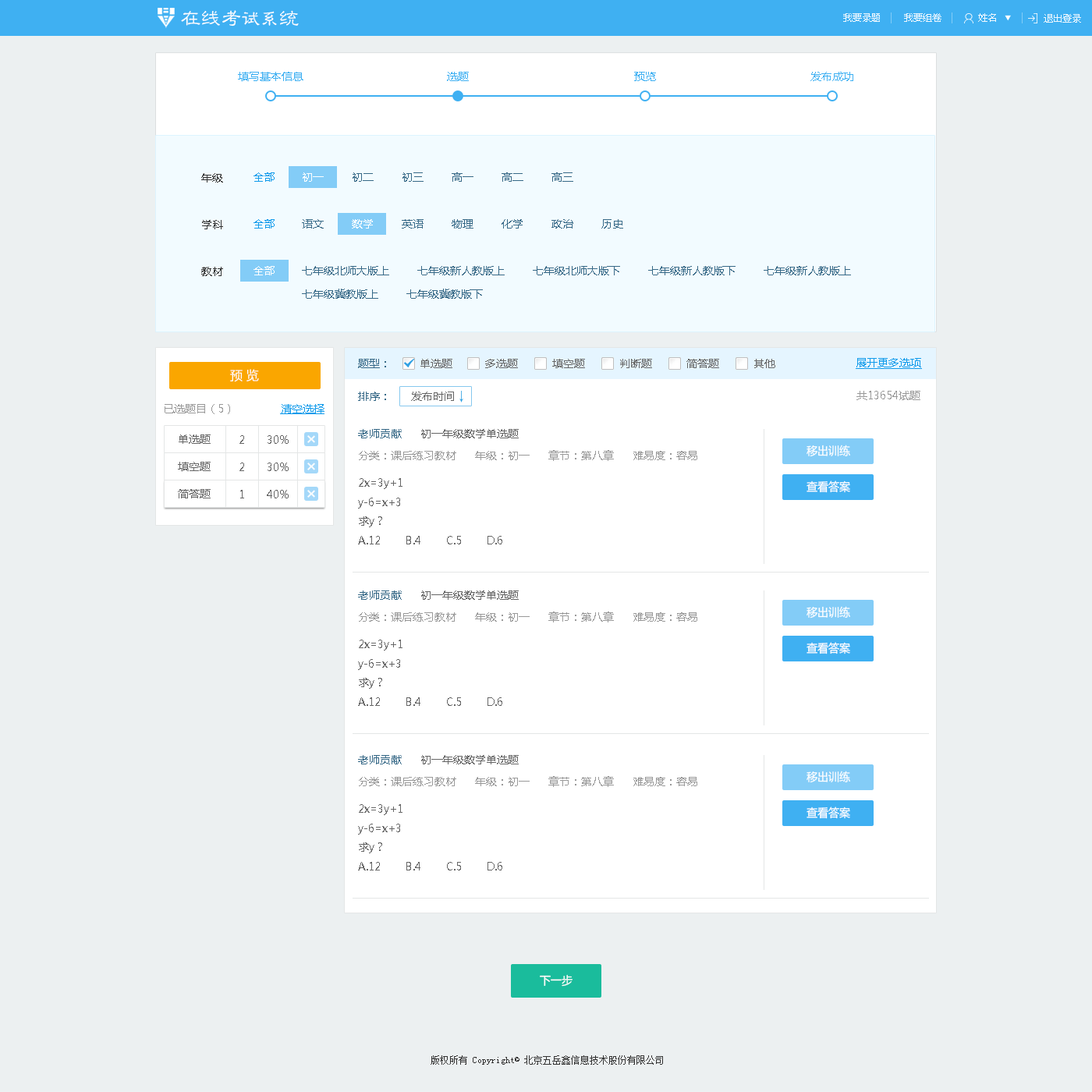
<style>
.page{position:relative;width:1092px;height:1092px;background:#ecf0f1}
.page>*{position:absolute;margin:0}
.t1{font:20.3px "GBJenLei-Medium";color:#ffffff}
.t2{font:18.7px "GBJenLei-Medium";color:#ffffff}
.t3{font:9.4px "MicrosoftYaHei";color:#ffffff}
.t4{font:10.9px "MicrosoftYaHei";color:#3fb0f2}
.t5{font:10.9px "MicrosoftYaHei";color:#333333}
.t6{font:10.9px "MicrosoftYaHei";color:#119beb}
.t7{font:10.9px "MicrosoftYaHei";color:#376987}
.t8{font:10.9px "MicrosoftYaHei";color:#ffffff}
.t9{font:10.9px/23.4px "MicrosoftYaHei";color:#376987}
.t10{font:10.9px "MicrosoftYaHei";color:#666666}
.t11{font:10.9px "MicrosoftYaHei";color:#119beb;text-decoration:underline}
.t12{font:12.5px "MicrosoftYaHei";color:#ffffff}
.t13{font:10.9px "MicrosoftYaHei";color:#999999}
.t14{font:11.2px "MicrosoftYaHei";color:#ffffff}
.t15{font:9.4px "NSimSun";color:#333333}
</style>
<div class="page">
<p class="t1" style="left:181px;top:10px;width:118px;height:17px">在线考<span class="t2">试系</span>统</p>
<p class="t3" style="left:843px;top:13px;width:37px;height:9px;opacity:0.9">我要录题</p>
<p class="t3" style="left:904px;top:13px;width:37px;height:9px;opacity:0.9">我要组卷</p>
<p class="t3" style="left:978px;top:13px;width:18px;height:9px;opacity:0.9">姓名</p>
<p class="t3" style="left:1044px;top:14px;width:37px;height:9px;opacity:0.9">退出登录</p>
<p class="t4" style="left:238px;top:72px;width:65px;height:9px">填写基本信息</p>
<p class="t4" style="left:447px;top:72px;width:22px;height:9px">选题</p>
<p class="t4" style="left:634px;top:72px;width:22px;height:9px">预览</p>
<p class="t4" style="left:810px;top:72px;width:43px;height:9px">发布成功</p>
<p class="t5" style="left:201px;top:173px;width:22px;height:10px">年级</p>
<p class="t6" style="left:253px;top:172px;width:22px;height:10px">全部</p>
<p class="t7" style="left:303px;top:172px;width:270px;height:10px"><span class="t8">初一</span>         初二         初三         高一         高二         高三</p>
<p class="t5" style="left:202px;top:220px;width:21px;height:9px">学科</p>
<p class="t6" style="left:253px;top:219px;width:22px;height:10px">全部</p>
<p class="t7" style="left:302px;top:219px;width:321px;height:10px">语文         <span class="t8">数学</span>         英语         物理         化学         政治         历史</p>
<p class="t5" style="left:201px;top:267px;width:22px;height:9px">教材</p>
<p class="t8" style="left:253px;top:266px;width:22px;height:9px">全部</p>
<p class="t9" style="left:302px;top:266px;width:549px;height:33px">七年级北师大版上         七年级新人教版上         七年级北师大版下         七年级新人教版下         七年级新人教版上         <br>七年级冀教版上         七年级冀教版下</p>
<p class="t7" style="left:358px;top:359px;width:28px;height:9px">题型：</p>
<p class="t10" style="left:420px;top:359px;width:32px;height:9px">单选题</p>
<p class="t10" style="left:485px;top:359px;width:33px;height:9px">多选题</p>
<p class="t10" style="left:552px;top:359px;width:33px;height:9px">填空题</p>
<p class="t10" style="left:620px;top:359px;width:32px;height:9px">判断题</p>
<p class="t10" style="left:686px;top:359px;width:33px;height:9px">简答题</p>
<p class="t10" style="left:754px;top:359px;width:21px;height:9px">其他</p>
<p class="t11" style="left:856px;top:358px;width:66px;height:11px">展开更多选项</p>
<p class="t12" style="left:230px;top:369px;width:29px;height:13px">预 览</p>
<p class="t7" style="left:358px;top:392px;width:28px;height:9px">排序：</p>
<p class="t10" style="left:411px;top:392px;width:43px;height:9px">发布时间</p>
<p class="t13" style="left:856px;top:391px;width:64px;height:9px">共13654试题</p>
<p class="t13" style="left:165px;top:404px;width:65px;height:10px">已选题目（5）</p>
<p class="t11" style="left:280px;top:404px;width:44px;height:10px">清空选择</p>
<p class="t10" style="left:179px;top:434px;width:32px;height:10px">单选题</p>
<p class="t10" style="left:239px;top:435px;width:5px;height:9px">2</p>
<p class="t10" style="left:268px;top:435px;width:21px;height:9px">30%</p>
<p class="t10" style="left:358px;top:429px;width:161px;height:9px"><span class="t7">老师贡献      </span>初一年级数学单选题</p>
<p class="t14" style="left:807px;top:445px;width:43px;height:12px">移出训练</p>
<p class="t10" style="left:178px;top:462px;width:33px;height:9px">填空题</p>
<p class="t13" style="left:359px;top:450px;width:338px;height:11px">分类：课后练习教材      年级：初一      章节：第八章      难易度：容易</p>
<p class="t10" style="left:239px;top:463px;width:5px;height:8px">2</p>
<p class="t10" style="left:268px;top:463px;width:21px;height:8px">30%</p>
<p class="t10" style="left:358px;top:478px;width:144px;height:66px">2x=3y+1<br>y-6=x+3<br>求y？<br>A.12        B.4        C.5        D.6</p>
<p class="t14" style="left:807px;top:480px;width:43px;height:13px">查看答案</p>
<p class="t10" style="left:178px;top:489px;width:33px;height:9px">简答题</p>
<p class="t10" style="left:240px;top:490px;width:4px;height:8px">1</p>
<p class="t10" style="left:267px;top:490px;width:22px;height:8px">40%</p>
<p class="t10" style="left:358px;top:590px;width:161px;height:10px"><span class="t7">老师贡献      </span>初一年级数学单选题</p>
<p class="t13" style="left:359px;top:612px;width:338px;height:10px">分类：课后练习教材      年级：初一      章节：第八章      难易度：容易</p>
<p class="t14" style="left:807px;top:606px;width:43px;height:13px">移出训练</p>
<p class="t10" style="left:358px;top:640px;width:144px;height:66px">2x=3y+1<br>y-6=x+3<br>求y？<br>A.12        B.4        C.5        D.6</p>
<p class="t14" style="left:807px;top:642px;width:43px;height:12px">查看答案</p>
<p class="t10" style="left:358px;top:755px;width:161px;height:9px"><span class="t7">老师贡献      </span>初一年级数学单选题</p>
<p class="t14" style="left:807px;top:771px;width:43px;height:12px">移出训练</p>
<p class="t13" style="left:359px;top:776px;width:338px;height:11px">分类：课后练习教材      年级：初一      章节：第八章      难易度：容易</p>
<p class="t10" style="left:358px;top:804px;width:144px;height:66px">2x=3y+1<br>y-6=x+3<br>求y？<br>A.12        B.4        C.5        D.6</p>
<p class="t14" style="left:807px;top:807px;width:43px;height:12px">查看答案</p>
<p class="t14" style="left:540px;top:974px;width:33px;height:13px">下一步</p>
<p class="t15" style="left:431px;top:1055px;width:232px;height:10px">版权所有 Copyright© 北京五岳鑫信息技术股份有限公司</p>
</div>
